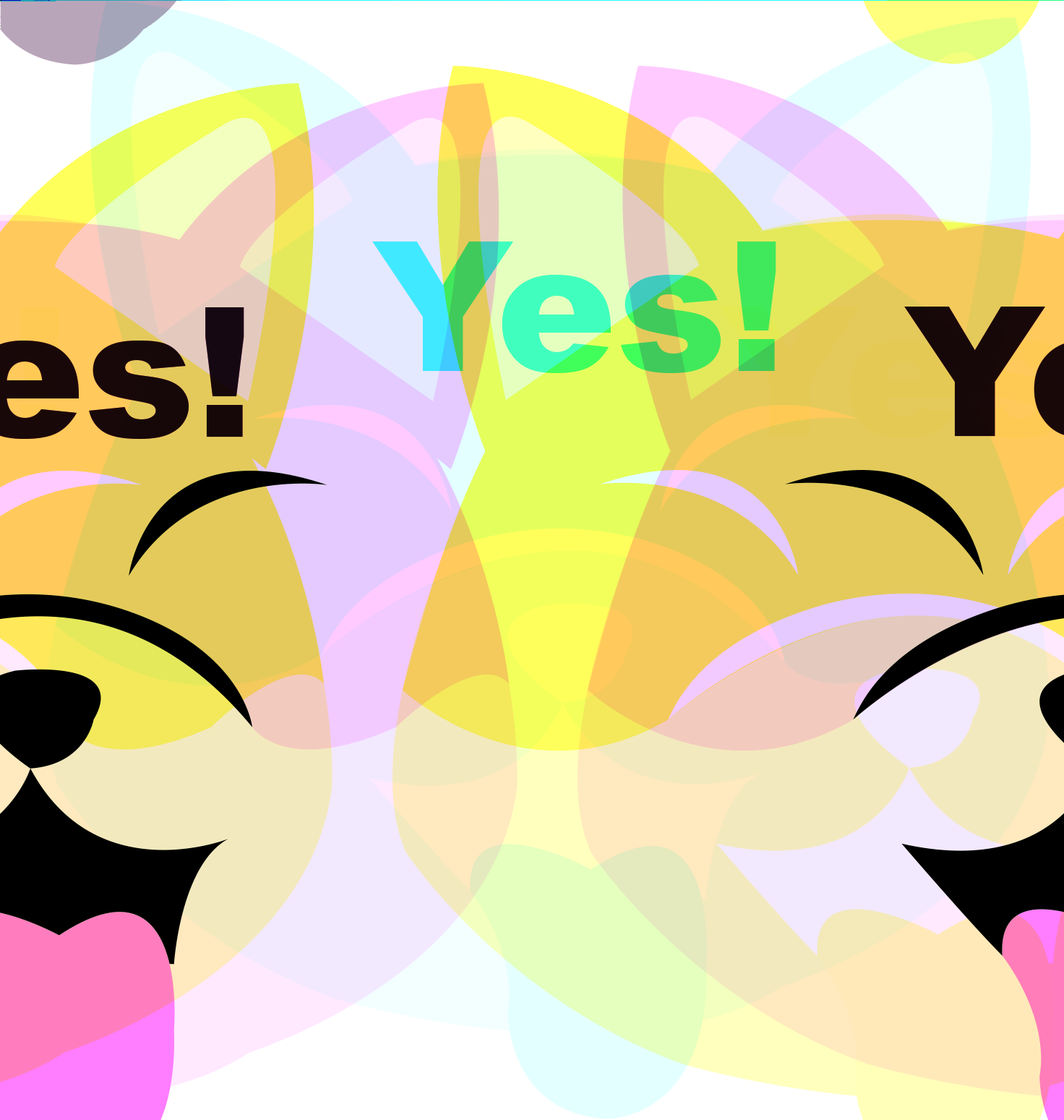
<style>
.page{position:relative;width:1064px;height:1120px}
.page>*{position:absolute;margin:0}
.t1{font:180.8px "Arial-Black"}
</style>
<div class="page">
<p class="t1" style="left:372px;top:241px;width:405px;height:131px">Yes!</p>
</div>
